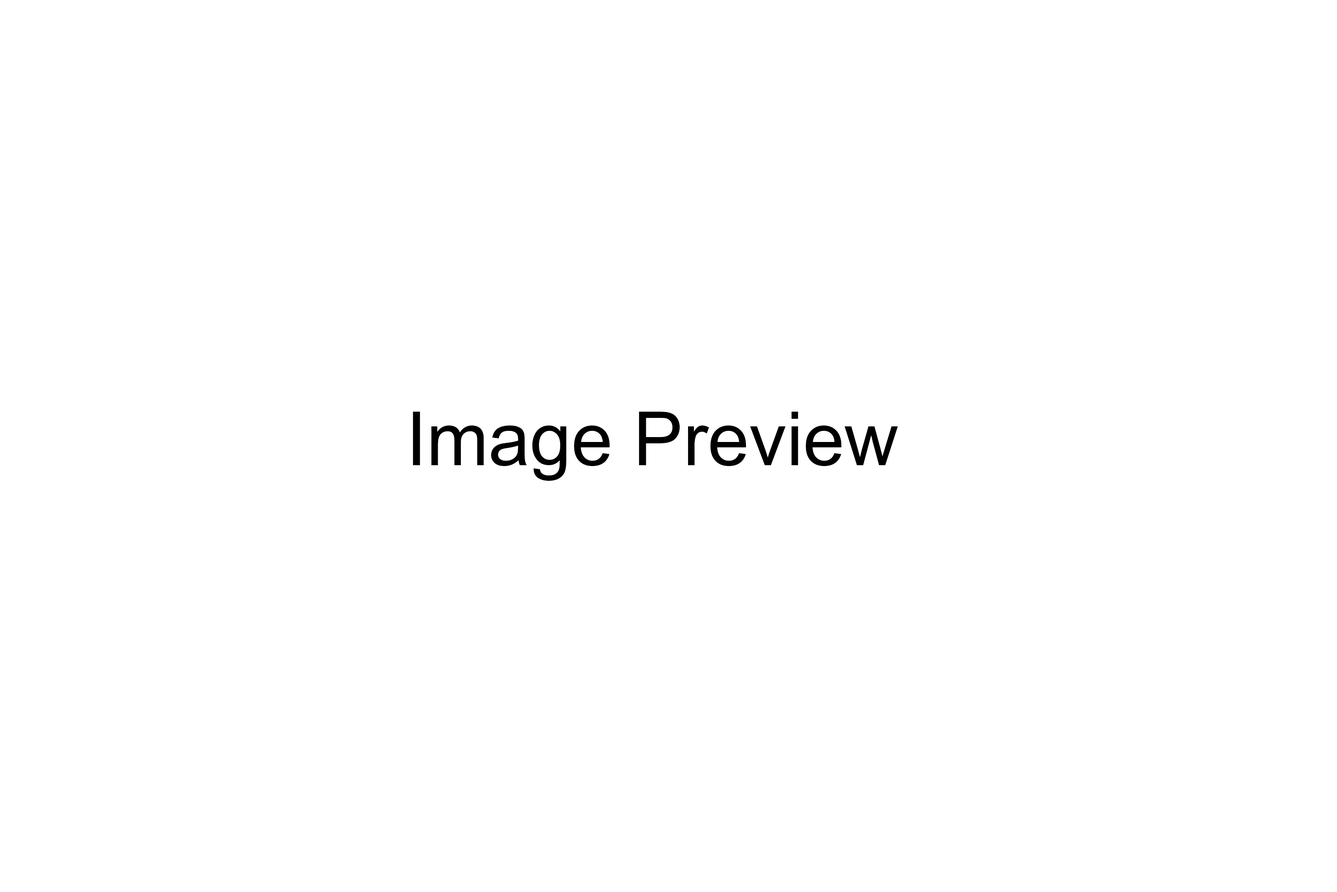
<style>
.page{position:relative;width:1337px;height:892px;background:#ffffff}
.page>*{position:absolute;margin:0}
.t1{font:74.4px "ArialMT";color:#000000}
</style>
<div class="page">
<p class="t1" style="left:413px;top:411px;width:485px;height:70px">Image Preview</p>
</div>
